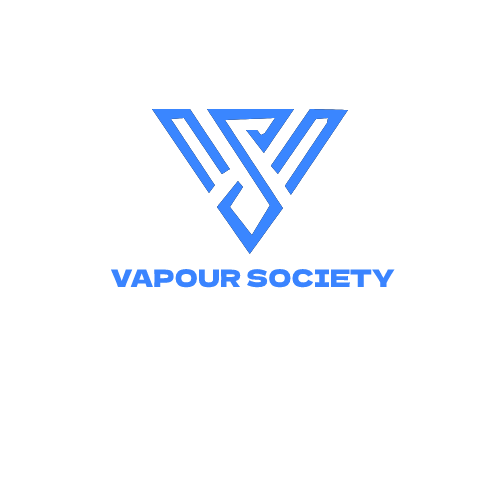
<style>
.page{position:relative;width:500px;height:500px;background:#ffffff}
.page>*{position:absolute;margin:0}
.t1{font:24px "DelaGothicOne-Regular";color:#3a84ff}
</style>
<div class="page">
<p class="t1" style="left:110px;top:269px;width:285px;height:19px">VAPOUR SOCIETY</p>
</div>
